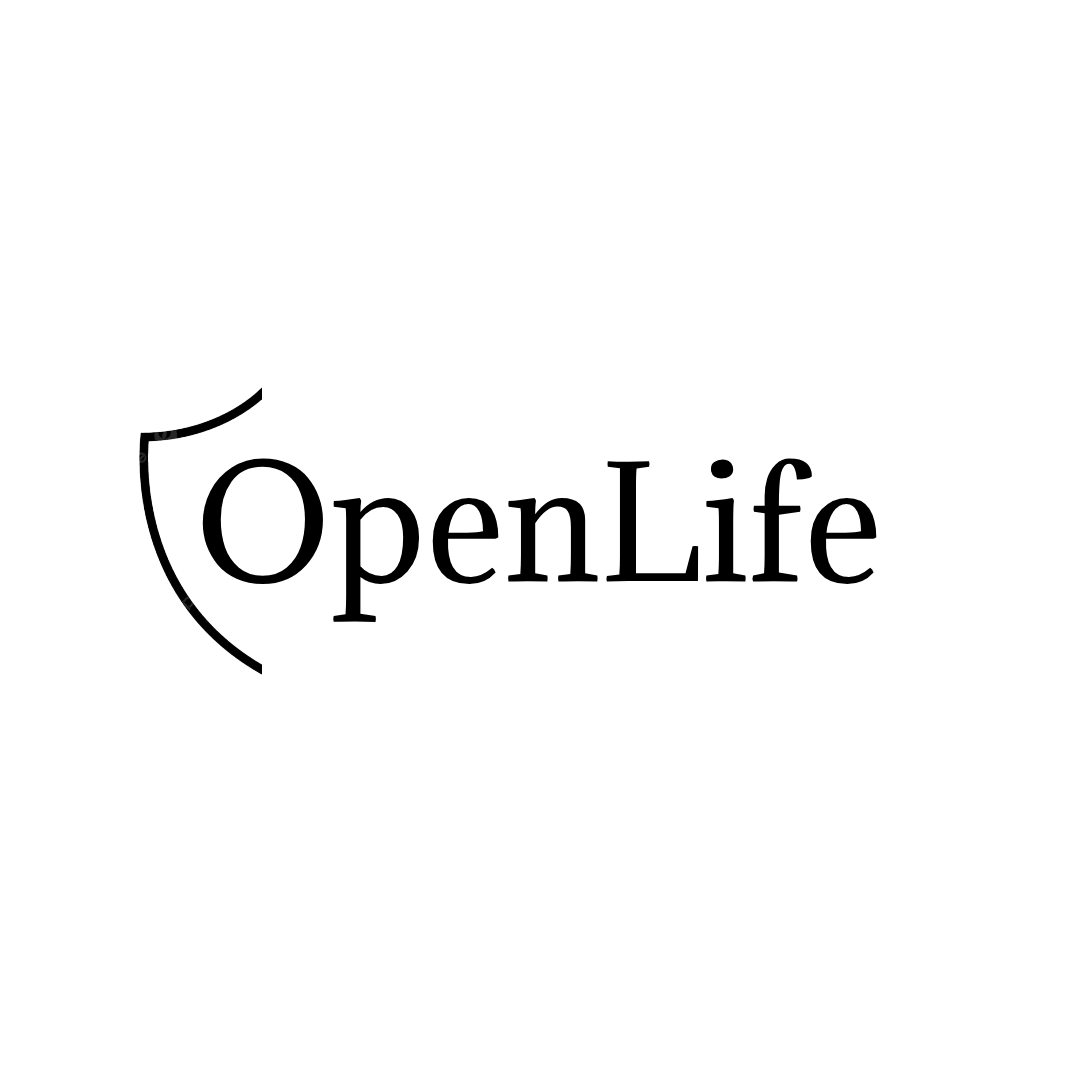
<style>
.page{position:relative;width:1080px;height:1080px;background:#ffffff}
.page>*{position:absolute;margin:0}
.t1{font:150px "Adamina-Regular";color:#000000}
</style>
<div class="page">
<p class="t1" style="left:202px;top:458px;width:675px;height:164px">OpenLife</p>
</div>
